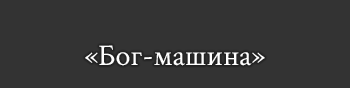
<style>
.page{position:relative;width:350px;height:88px;background:#333333}
.page>*{position:absolute;margin:0}
.t1{font:30px "CrimsonText-Regular";color:#ffffff}
</style>
<div class="page">
<p class="t1" style="left:85px;top:45px;width:180px;height:21px">«Бог-машина»</p>
</div>
